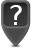
<style>
.page{position:relative;width:32px;height:48px;background:#ffffff}
.page>*{position:absolute;margin:0}
.t1{font:28.3px "DejaVuSansMono";color:#ffffff}
</style>
<div class="page">
<p class="t1" style="left:10px;top:5px;width:12px;height:20px">?</p>
</div>
